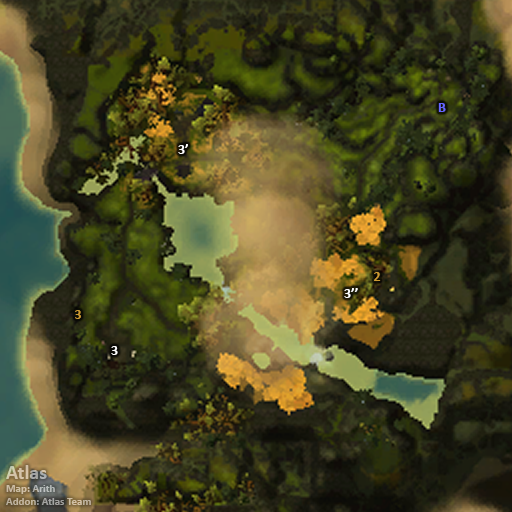
<style>
.page{position:relative;width:512px;height:512px}
.page>*{position:absolute;margin:0}
.t1{font:14px "Calibri-Bold";color:#6666ff}
.t2{font:14px "Calibri-Bold";color:#ffffff}
.t3{font:14px "Calibri-Bold";color:#cc9933}
.t4{font:11px "Calibri-Bold"}
.t5{font:20px "Calibri-Bold"}
</style>
<div class="page">
<p class="t1" style="left:438px;top:103px;width:8px;height:9px">B</p>
<p class="t2" style="left:178px;top:144px;width:10px;height:10px">3’</p>
<p class="t3" style="left:374px;top:272px;width:7px;height:9px">2</p>
<p class="t2" style="left:344px;top:288px;width:14px;height:10px">3’’</p>
<p class="t3" style="left:75px;top:310px;width:6px;height:9px">3</p>
<p class="t2" style="left:111px;top:346px;width:7px;height:9px">3</p>
<p class="t4" style="left:6px;top:465px;width:85px;height:40px"><span class="t5">Atlas<br></span>Map: Arith<br>Addon: Atlas Team</p>
</div>
